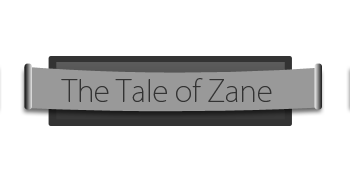
<style>
.page{position:relative;width:350px;height:180px;background:#ffffff}
.page>*{position:absolute;margin:0}
.t1{font:29.4px "KozGoPro-ExtraLight";color:#333333}
</style>
<div class="page">
<p class="t1" style="left:61px;top:78px;width:211px;height:24px">The Tale of Zane</p>
</div>
